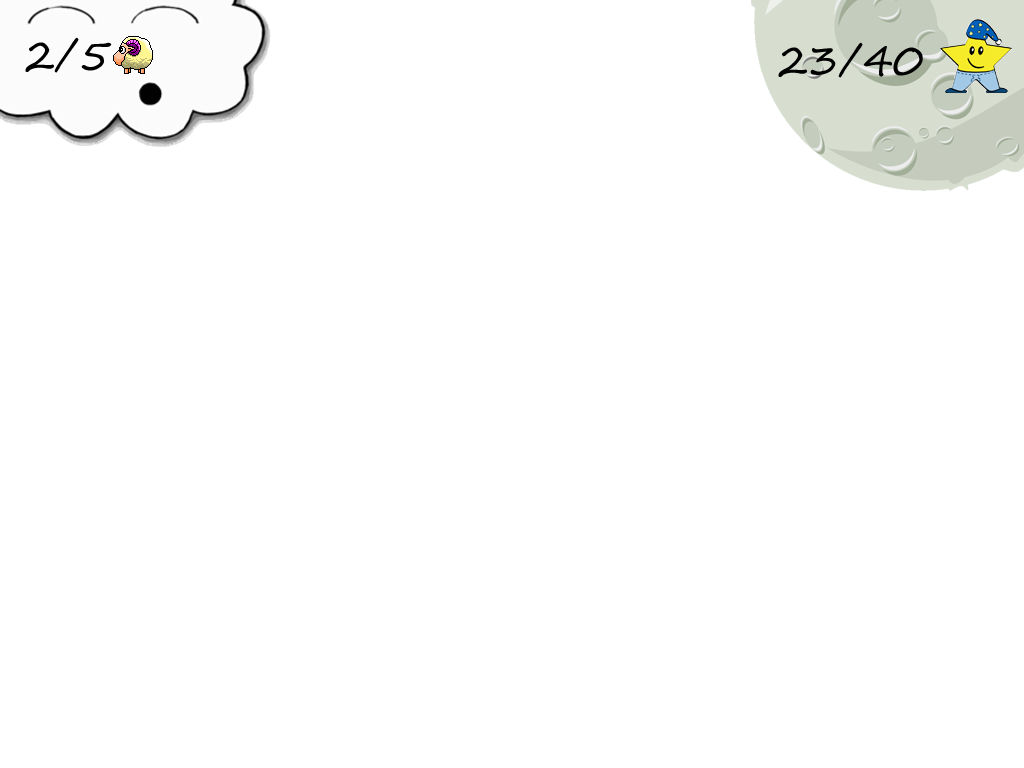
<style>
.page{position:relative;width:1024px;height:768px;background:#ffffff}
.page>*{position:absolute;margin:0}
.t1{font:41.7px "SegoePrint";color:#000000}
</style>
<div class="page">
<p class="t1" style="left:25px;top:37px;width:87px;height:36px">2/5</p>
<p class="t1" style="left:778px;top:42px;width:145px;height:36px">23/40</p>
</div>
